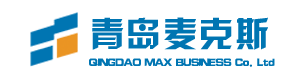
<style>
.page{position:relative;width:290px;height:83px;background:#ffffff}
.page>*{position:absolute;margin:0}
.t1{font:34.5px "HYk2gj";letter-spacing:0.05em;color:#0075b2}
.t2{font:11px "HYk2gj";letter-spacing:-0.12em;color:#0075b2}
</style>
<div class="page">
<p class="t1" style="left:92px;top:17px;width:176px;height:33px">青岛麦克斯</p>
<p class="t2" style="left:89px;top:58px;width:186px;height:9px">QINGDAO MAX BUSINESS Co. Ltd</p>
</div>
